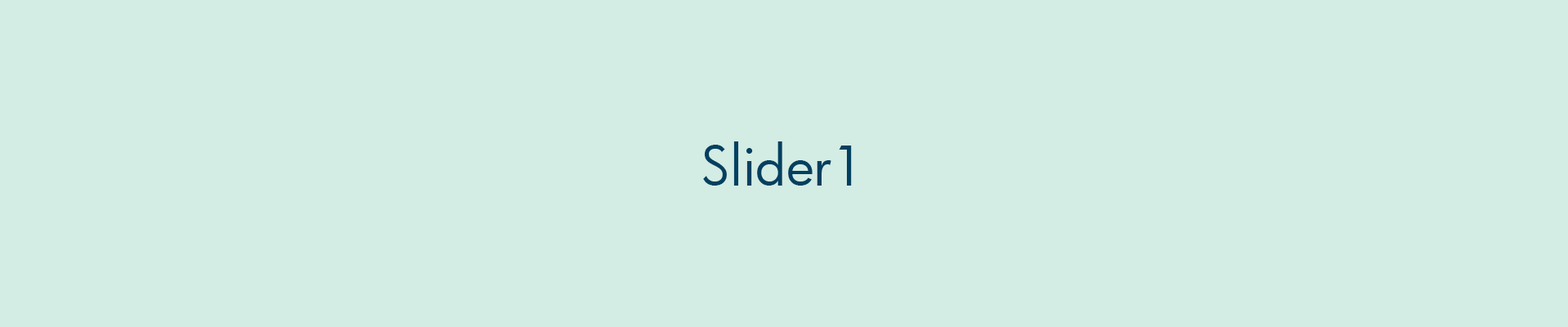
<style>
.page{position:relative;width:1568px;height:327px;background:#d3ece4}
.page>*{position:absolute;margin:0}
.t1{font:53.1px "Futura-Book";color:#014060}
</style>
<div class="page">
<p class="t1" style="left:703px;top:141px;width:149px;height:44px">Slider1</p>
</div>
